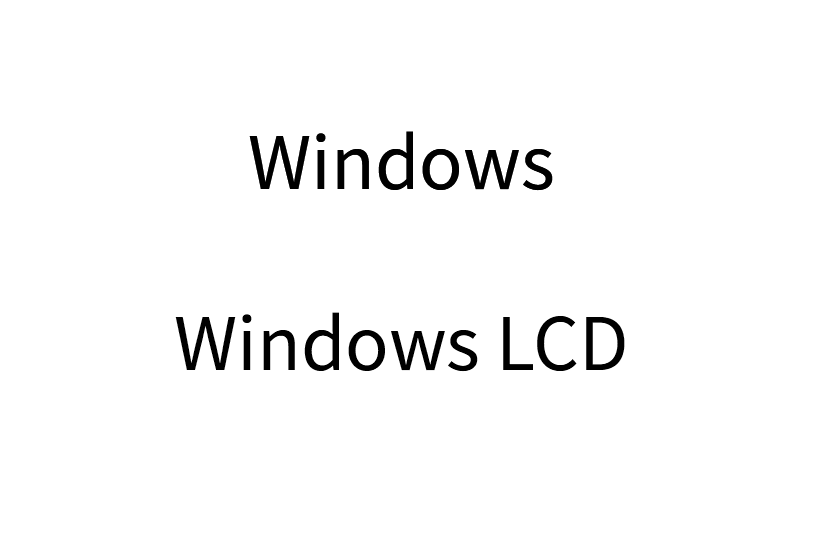
<style>
.page{position:relative;width:817px;height:533px;background:#ffffff}
.page>*{position:absolute;margin:0}
.t1{font:72px "NotoSansKR-Regular";color:#000000}
</style>
<div class="page">
<p class="t1" style="left:249px;top:131px;width:304px;height:60px">Windows</p>
<p class="t1" style="left:175px;top:312px;width:450px;height:60px">Windows LCD</p>
</div>
